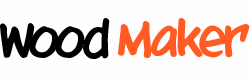
<style>
.page{position:relative;width:250px;height:80px;background:#fffefe}
.page>*{position:absolute;margin:0}
.t1{font:40.7px "mixtapeMike_TRIAL";color:#000000}
.t2{font:40.7px "mixtapeMike_TRIAL";color:#ff5b23}
</style>
<div class="page">
<p class="t1" style="left:0px;top:18px;width:110px;height:41px">Wood</p>
<p class="t2" style="left:118px;top:18px;width:132px;height:40px">Maker</p>
</div>
